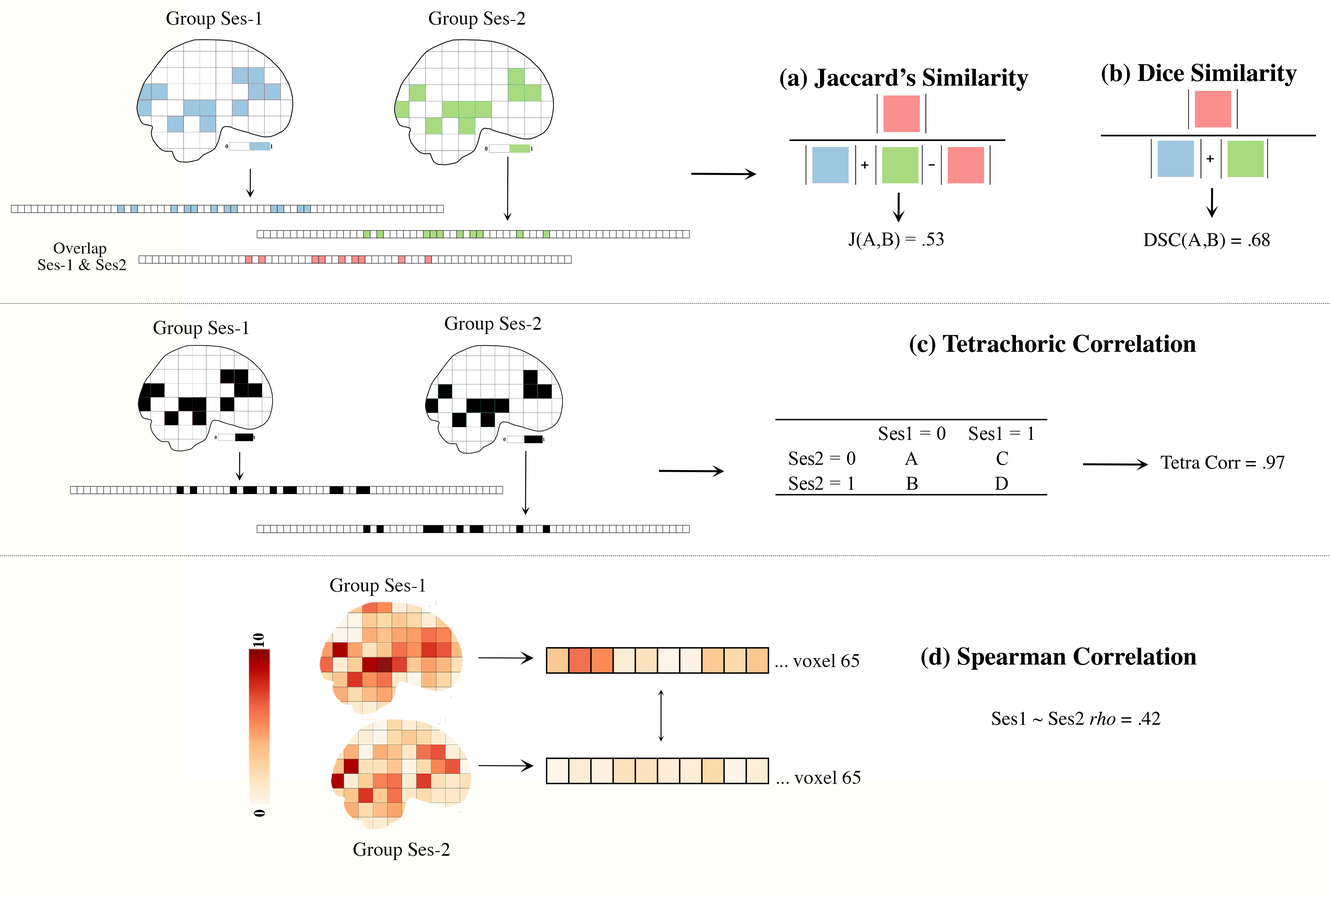
<style>
.page{position:relative;width:1330px;height:897px;background:#ffffff}
.page>*{position:absolute;margin:0}
.t1{font:19.4px "Times-Roman";color:#030303}
.t2{font:24.9px "Times-Bold";color:#030303}
.t3{font:16.6px/16.6px "Times-Roman";color:#030303}
.t4{font:19.4px "Times-Italic";color:#030303}
</style>
<div class="page">
<p class="t1" style="left:166px;top:11px;width:95px;height:18px">Group Ses-1</p>
<p class="t1" style="left:429px;top:11px;width:97px;height:18px">Group Ses-2</p>
<p class="t2" style="left:1102px;top:64px;width:195px;height:22px">(b) Dice Similarity</p>
<p class="t2" style="left:780px;top:68px;width:248px;height:23px">(a) Jaccard’s Similarity</p>
<p class="t1" style="left:1143px;top:232px;width:127px;height:17px">DSC(A,B) = .68</p>
<p class="t3" style="left:38px;top:242px;width:88px;height:28px;text-align:center">Overlap <br>Ses-1 &amp; Ses2</p>
<p class="t1" style="left:445px;top:316px;width:96px;height:18px">Group Ses-2</p>
<p class="t1" style="left:153px;top:321px;width:95px;height:17px">Group Ses-1</p>
<p class="t2" style="left:910px;top:334px;width:286px;height:22px">(c) Tetrachoric Correlation</p>
<p class="t1" style="left:1160px;top:455px;width:125px;height:14px">Tetra Corr = .97</p>
<p class="t1" style="left:330px;top:578px;width:95px;height:18px">Group Ses-1</p>
<p class="t1" style="left:775px;top:653px;width:84px;height:14px">... voxel 65</p>
<p class="t2" style="left:921px;top:647px;width:275px;height:23px">(d) Spearman Correlation</p>
<p class="t1" style="left:992px;top:711px;width:168px;height:14px">Ses1 ~ Ses2 <span class="t4">rho</span> = .42</p>
<p class="t1" style="left:777px;top:770px;width:83px;height:14px">... voxel 65</p>
<p class="t1" style="left:353px;top:842px;width:97px;height:18px">Group Ses-2</p>
</div>
